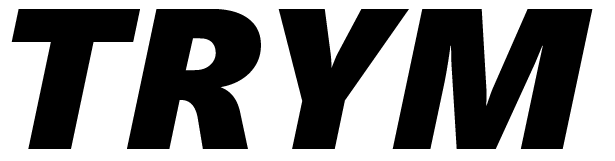
<style>
.page{position:relative;width:615px;height:161px;background:#ffffff}
.page>*{position:absolute;margin:0}
.t1{font:200px "SegoeUIBlack-Italic";color:#000000}
</style>
<div class="page">
<p class="t1" style="left:11px;top:9px;width:582px;height:140px">TRYM</p>
</div>
